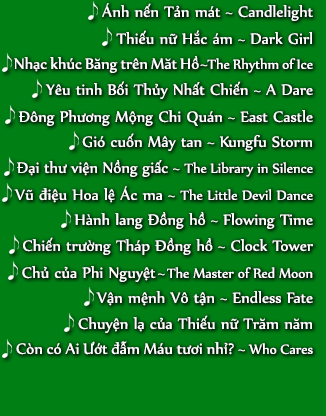
<style>
.page{position:relative;width:326px;height:416px;background:#007f15}
.page>*{position:absolute;margin:0}
.t1{font:18px "UTM-Nyala";color:#ffffff}
.t2{font:16px "UTM-Nyala";color:#ffffff}
</style>
<div class="page">
<p class="t1" style="left:102px;top:3px;width:211px;height:18px">Ánh nến Tản mát ~ Candlelight</p>
<p class="t1" style="left:116px;top:30px;width:196px;height:15px">Thiếu nữ Hắc ám ~ Dark Girl</p>
<p class="t1" style="left:14px;top:56px;width:299px;height:17px">Nhạc khúc Băng trên Măt Hồ~<span class="t2">The Rhythm of Ice</span></p>
<p class="t1" style="left:45px;top:81px;width:268px;height:18px">Yêu tinh Bối Thủy Nhất Chiến ~ A Dare</p>
<p class="t1" style="left:18px;top:110px;width:295px;height:16px">Đông Phương Mộng Chi Quán ~ East Castle</p>
<p class="t1" style="left:82px;top:133px;width:230px;height:18px">Gió cuốn Mây tan ~ Kungfu Storm</p>
<p class="t1" style="left:17px;top:160px;width:296px;height:17px">Đại thư viện Nồng giấc ~ <span class="t2">The Library in Silence</span></p>
<p class="t1" style="left:14px;top:186px;width:299px;height:17px">Vũ điệu Hoa lệ Ác ma ~ <span class="t2">The Little Devil Dance</span></p>
<p class="t1" style="left:74px;top:212px;width:239px;height:17px">Hành lang Đồng hồ ~ Flowing Time</p>
<p class="t1" style="left:23px;top:237px;width:290px;height:18px">Chiến trường Tháp Đồng hồ ~ Clock Tower</p>
<p class="t2" style="left:22px;top:266px;width:291px;height:16px"><span class="t1">Chủ của Phi Nguyệt ~ </span>The Master of Red Moon</p>
<p class="t1" style="left:96px;top:291px;width:217px;height:15px">Vận mệnh Vô tận ~ Endless Fate</p>
<p class="t1" style="left:78px;top:315px;width:234px;height:18px">Chuyện lạ của Thiếu nữ Trăm năm</p>
<p class="t1" style="left:16px;top:341px;width:297px;height:14px">Còn có Ai Ướt đẫm Máu tươi nhỉ? ~ <span class="t2">Who Cares</span></p>
</div>
